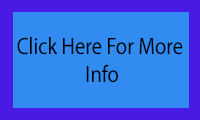
<style>
.page{position:relative;width:200px;height:120px;background:#318bf0}
.page>*{position:absolute;margin:0}
.t1{font:23.9px "MyriadPro-Regular";color:#000000;scale:0.86 1}
</style>
<div class="page">
<p class="t1" style="left:17px;top:37px;width:166px;height:46px;text-align:center">Click Here For More <br>Info</p>
</div>
